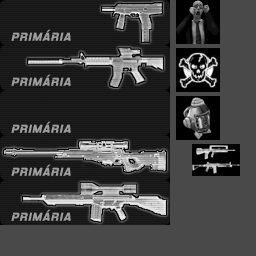
<style>
.page{position:relative;width:256px;height:256px;background:#1d1d1d}
.page>*{position:absolute;margin:0}
.t1{font:11.5px "HemiHeadRg-BoldItalic";letter-spacing:0.08em;color:#9d9d9d;text-transform:uppercase}
</style>
<div class="page">
<p class="t1" style="left:11px;top:29px;width:60px;height:12px">pRIMÁRIA</p>
<p class="t1" style="left:11px;top:74px;width:60px;height:12px">pRIMÁRIA</p>
<p class="t1" style="left:11px;top:121px;width:60px;height:12px">PRIMÁRIA</p>
<p class="t1" style="left:11px;top:164px;width:60px;height:12px">PRIMÁRIA</p>
<p class="t1" style="left:11px;top:209px;width:60px;height:12px">PRIMÁRIA</p>
</div>
